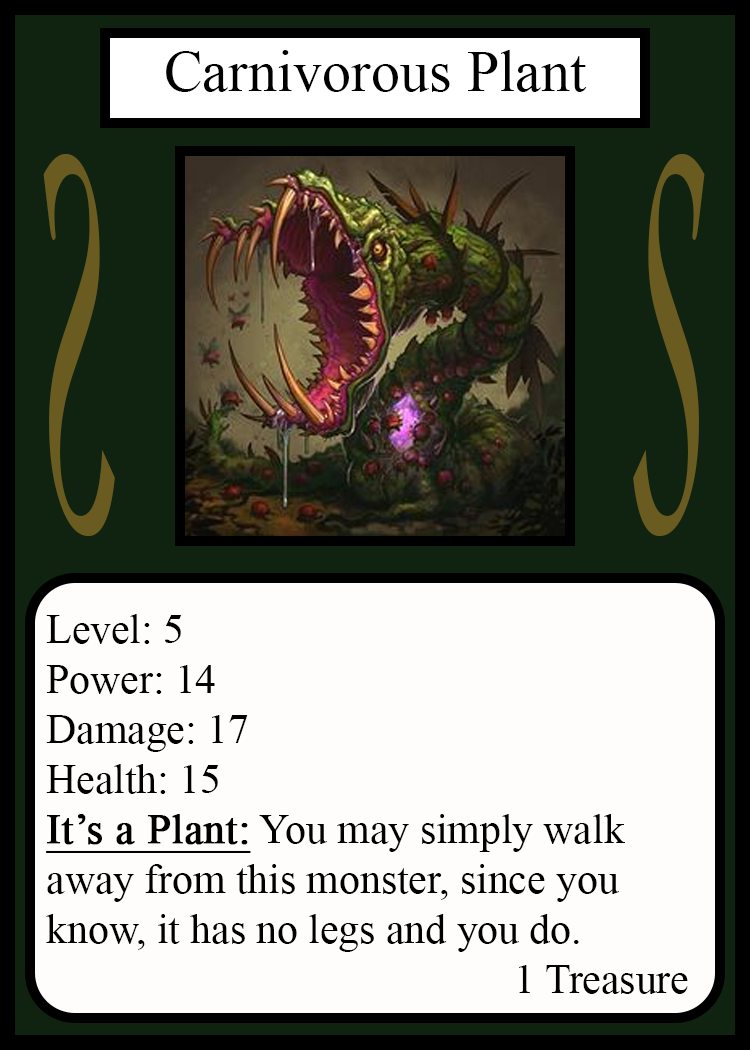
<style>
.page{position:relative;width:750px;height:1050px;background:#fffcfc}
.page>*{position:absolute;margin:0}
.t1{font:58.3px "TimesNewRomanPSMT";color:#010101}
.t2{font:548.5px "Apple-Chancery";color:#6a5c21;scale:0.27 1}
.t3{font:548.2px "Apple-Chancery";color:#6a5c21;scale:0.27 1}
.t4{font:41.7px "TimesNewRomanPSMT";color:#000000}
.t5{font:41.7px "TimesNewRomanPSMT";color:#000000;font-weight:bold;text-decoration:underline}
</style>
<div class="page">
<p class="t1" style="left:166px;top:50px;width:421px;height:42px">Carnivorous Plant</p>
<p class="t2" style="left:43px;top:154px;width:72px;height:382px;rotate:180deg">S</p>
<p class="t3" style="left:633px;top:154px;width:72px;height:382px">S</p>
<p class="t4" style="left:46px;top:614px;width:642px;height:380px">Level: 5<br>Power: 14<br>Damage: 17<br>Health: 15<br><span class="t5">It’s a Plant:</span> You may simply walk<br>away from this monster, since you <br>know, it has no legs and you do.<br>             1 Treasure</p>
</div>
